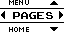
<style>
.page{position:relative;width:64px;height:32px;background:#ffffff}
.page>*{position:absolute;margin:0}
.t1{font:8px "04b03";color:#000000;scale:1.06 1}
.t2{font:14px "ArcadeClassic";color:#000000;scale:1.05 1}
</style>
<div class="page">
<p class="t1" style="left:9px;top:0px;width:20px;height:5px">MENU</p>
<p class="t2" style="left:13px;top:12px;width:40px;height:7px">PAGES</p>
<p class="t1" style="left:9px;top:27px;width:20px;height:5px">HOME</p>
</div>
